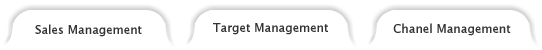
<style>
.page{position:relative;width:542px;height:50px;background:#ffffff}
.page>*{position:absolute;margin:0}
.t1{font:12px "LucidaGrande";color:#333333}
</style>
<div class="page">
<p class="t1" style="left:35px;top:24px;width:107px;height:13px">Sales Management</p>
<p class="t1" style="left:213px;top:23px;width:115px;height:12px">Target Management</p>
<p class="t1" style="left:393px;top:23px;width:118px;height:13px">Chanel Management</p>
</div>
